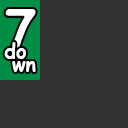
<style>
.page{position:relative;width:128px;height:128px;background:#333333}
.page>*{position:absolute;margin:0}
.t1{font:20.1px/12.5px "ComicSansMS-Bold";color:#ffffff}
</style>
<div class="page">
<p class="t1" style="left:4px;top:42px;width:32px;height:30px;text-align:center">do<br>  wn</p>
</div>
